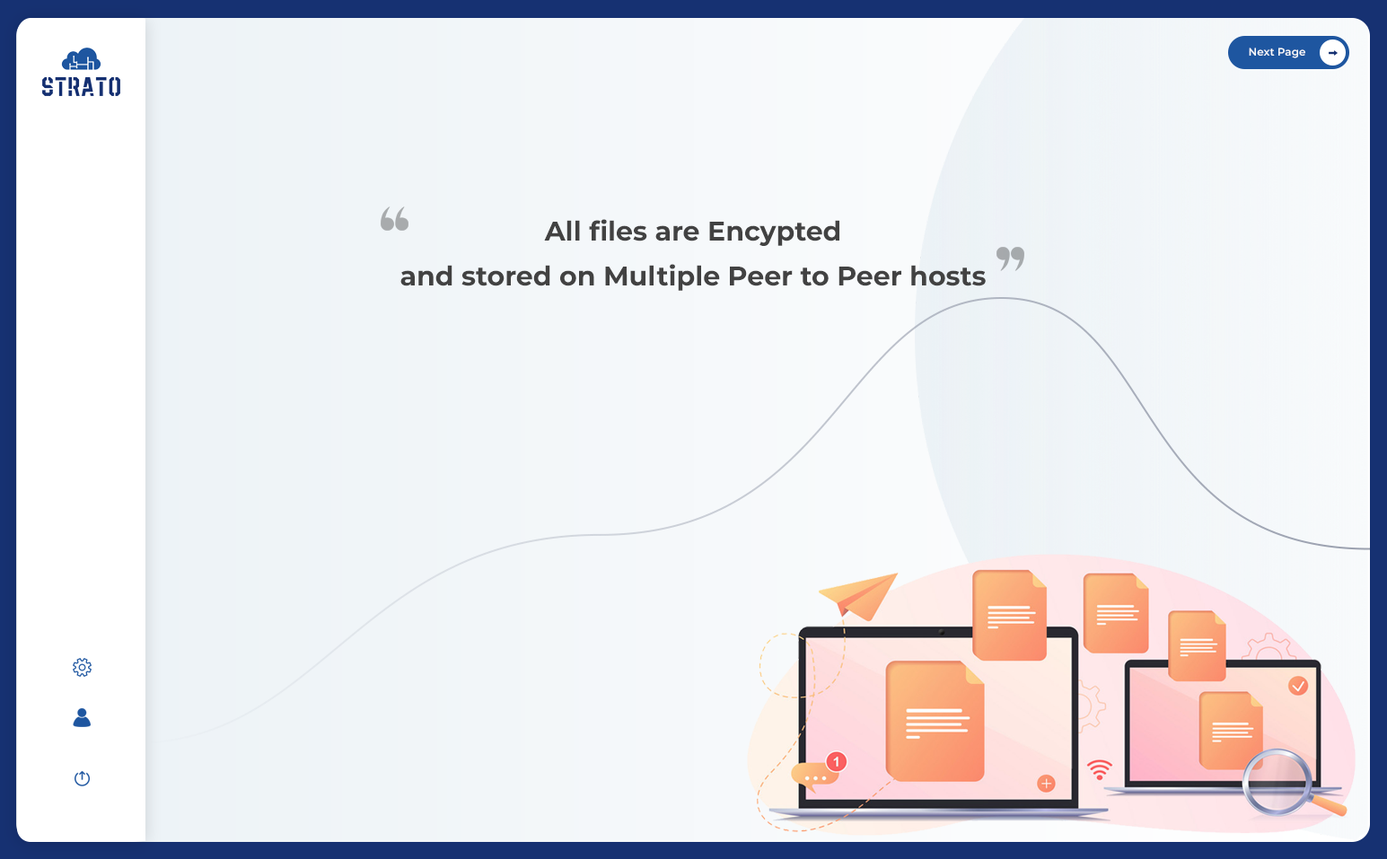
<style>
.page{position:relative;width:1387px;height:859px}
.page>*{position:absolute;margin:0}
.t1{font:10.8px "Montserrat-SemiBold";color:#f9fbfc}
.t2{font:26.9px/44.9px "Montserrat-Bold";color:#424242}
</style>
<div class="page">
<p class="t1" style="left:1249px;top:48px;width:57px;height:10px">Next Page</p>
<p class="t2" style="left:401px;top:219px;width:585px;height:72px;text-align:center">All files are Encypted<br>and stored on Multiple Peer to Peer hosts</p>
</div>
